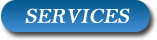
<style>
.page{position:relative;width:157px;height:40px}
.page>*{position:absolute;margin:0}
.t1{font:36px "BellMT";color:#ffffff;font-weight:bold;font-style:italic}
</style>
<div class="page">
<p class="t1" style="left:25px;top:8px;width:105px;height:15px">SERVICES</p>
</div>
